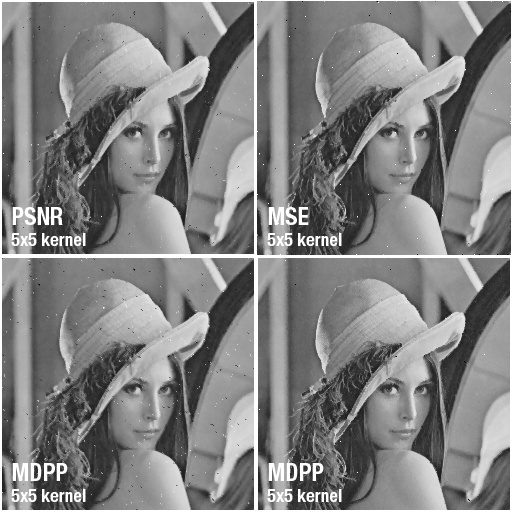
<style>
.page{position:relative;width:512px;height:512px}
.page>*{position:absolute;margin:0}
.t1{font:18px "HelveticaNeueLTPro-BdCn";color:#ffffff}
.t2{font:24px "HelveticaNeueLTPro-BdCn";color:#ffffff}
</style>
<div class="page">
<p class="t1" style="left:11px;top:207px;width:75px;height:39px;text-align:justify"><span class="t2">PSNR<br></span>5x5 kernel</p>
<p class="t1" style="left:267px;top:207px;width:75px;height:39px;text-align:justify"><span class="t2">MSE<br></span>5x5 kernel</p>
<p class="t1" style="left:11px;top:463px;width:75px;height:39px;text-align:justify"><span class="t2">MDPP<br></span>5x5 kernel</p>
<p class="t1" style="left:267px;top:463px;width:75px;height:39px;text-align:justify"><span class="t2">MDPP<br></span>5x5 kernel</p>
</div>
